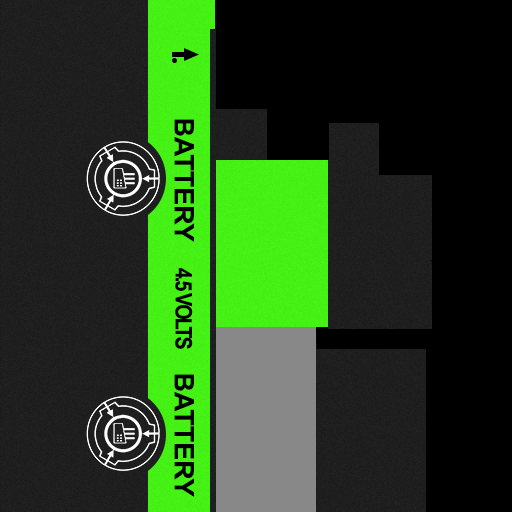
<style>
.page{position:relative;width:512px;height:512px;background:#000000}
.page>*{position:absolute;margin:0}
.t1{font:26.9px "Arial-BoldMT";color:#000000}
.t2{font:22.7px "Arial-BoldMT";letter-spacing:-0.1em;color:#000000;scale:0.87 1}
</style>
<div class="page">
<p class="t1" style="left:174px;top:119px;width:20px;height:123px;rotate:90deg">BATTERY</p>
<p class="t2" style="left:175px;top:268px;width:18px;height:81px;rotate:90deg">4.5 VOLTS</p>
<p class="t1" style="left:174px;top:374px;width:20px;height:123px;rotate:90deg">BATTERY</p>
</div>
